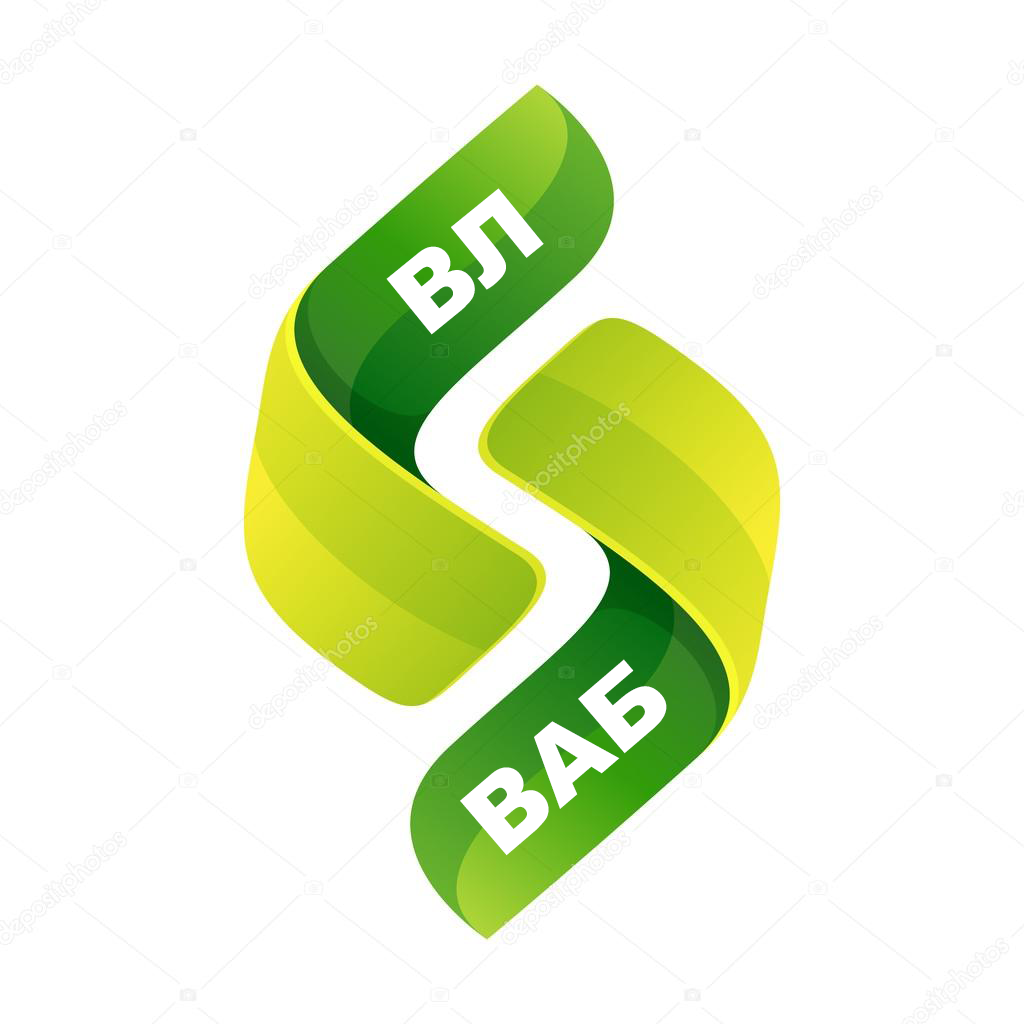
<style>
.page{position:relative;width:1024px;height:1024px;background:#ffffff}
.page>*{position:absolute;margin:0}
.t1{font:100px "Arial-Black";color:#ffffff}
</style>
<div class="page">
<p class="t1" style="left:386px;top:188px;width:158px;height:147px;rotate:-39deg">ВЛ</p>
<p class="t1" style="left:460px;top:659px;width:207px;height:197px;rotate:-41deg">ВАБ</p>
</div>
